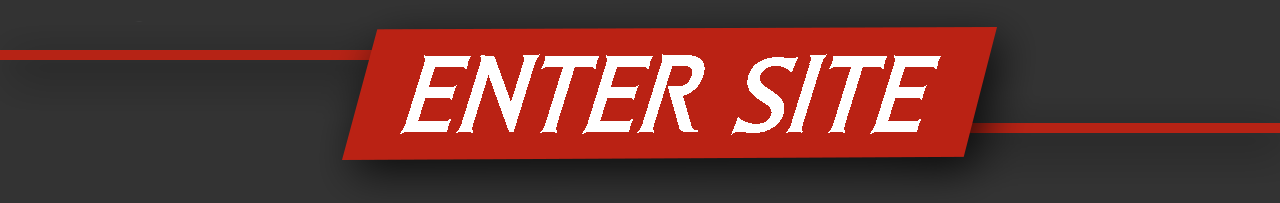
<style>
.page{position:relative;width:1280px;height:203px;background:#333333}
.page>*{position:absolute;margin:0}
.t1{font:154px "SRI-SURY-WONGSE-Bold";color:#ffffff;scale:0.9 1}
</style>
<div class="page">
<p class="t1" style="left:400px;top:54px;width:541px;height:81px">ENTER SITE</p>
</div>
